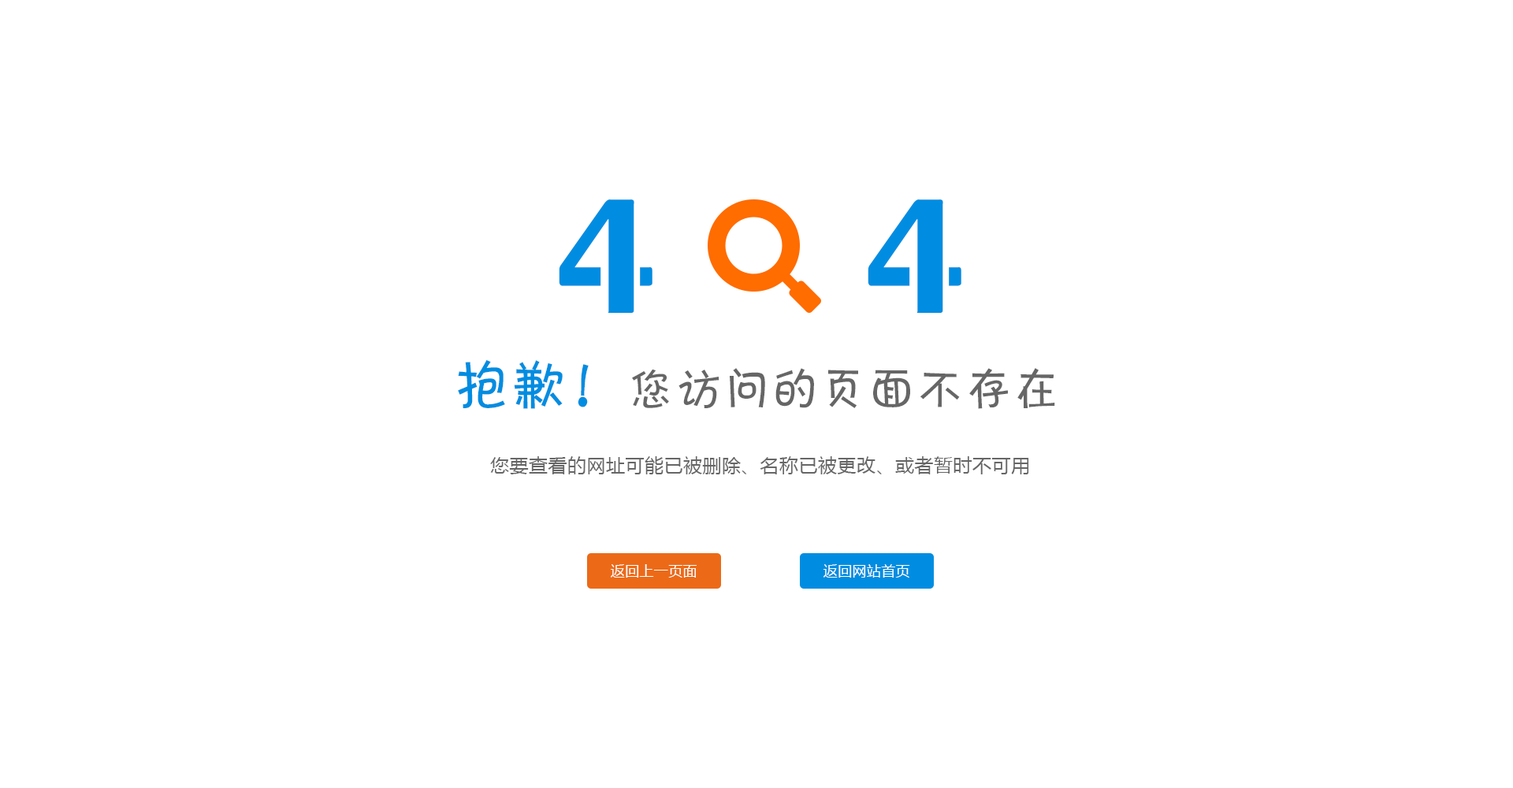
<style>
.page{position:relative;width:1513px;height:788px;background:#ffffff}
.page>*{position:absolute;margin:0}
.t1{font:157.6px "FZJZJW--GB1-0";letter-spacing:0.02em;color:#008de1}
.t2{font:47.3px "FZKATJW--GB1-0";letter-spacing:0.02em;color:#666666}
.t3{font:56.7px "FZKATJW--GB1-0";letter-spacing:0.02em;color:#008de1}
.t4{font:18.9px "MicrosoftYaHei";letter-spacing:0.02em;color:#666666}
.t5{font:14.2px "MicrosoftYaHei";letter-spacing:0.02em;color:#ffffff}
</style>
<div class="page">
<p class="t1" style="left:559px;top:199px;width:402px;height:114px">4     4</p>
<p class="t2" style="left:458px;top:360px;width:597px;height:49px"><span class="t3">抱歉！</span>您访问的页面不存在</p>
<p class="t4" style="left:490px;top:456px;width:539px;height:18px">您要查看的网址可能已被删除、名称已被更改、或者暂时不可用</p>
<p class="t5" style="left:611px;top:564px;width:86px;height:14px">返回上一页面</p>
<p class="t5" style="left:824px;top:564px;width:86px;height:14px">返回网站首页</p>
</div>
